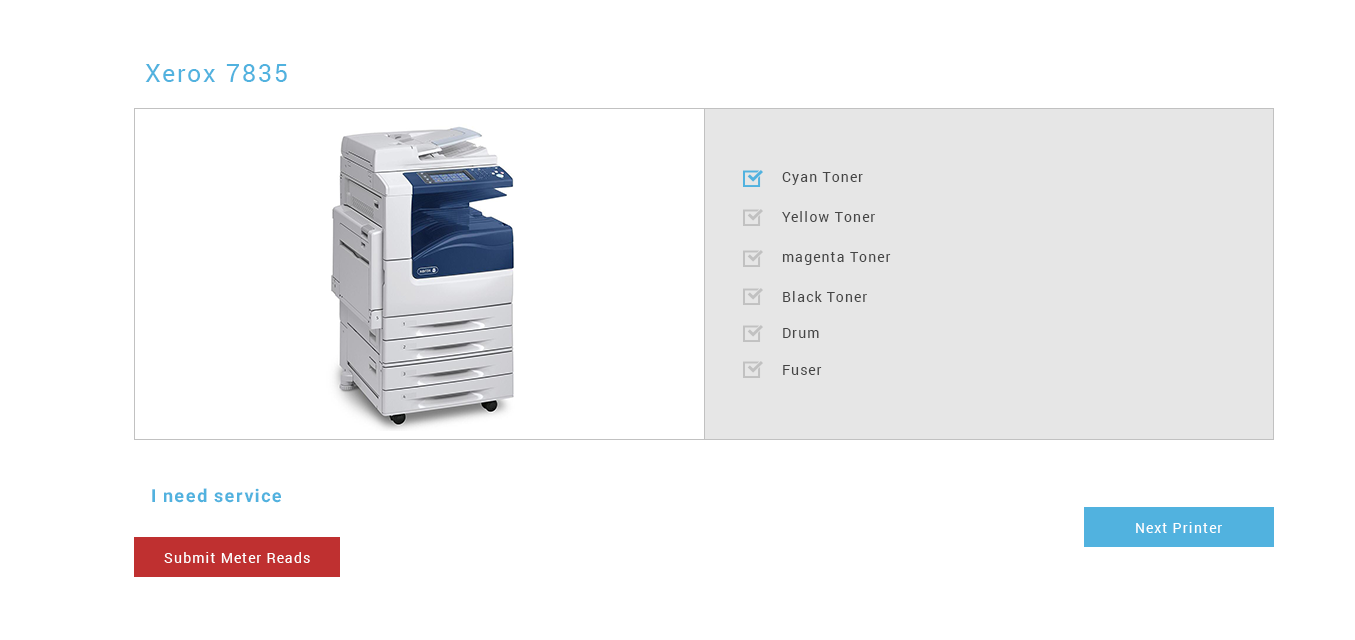
<style>
.page{position:relative;width:1355px;height:640px;background:#ffffff}
.page>*{position:absolute;margin:0}
.t1{font:25px "Roboto-Regular";letter-spacing:0.08em;color:#51b2df}
.t2{font:14px "Roboto-Regular";letter-spacing:0.08em;color:#454545}
.t3{font:18px "Roboto-Bold";letter-spacing:0.08em;color:#51b2df}
.t4{font:14px "Roboto-Regular";letter-spacing:0.08em;color:#ffffff}
</style>
<div class="page">
<p class="t1" style="left:145px;top:64px;width:142px;height:18px">Xerox 7835</p>
<p class="t2" style="left:782px;top:172px;width:81px;height:13px">Cyan Toner</p>
<p class="t2" style="left:782px;top:211px;width:93px;height:11px">Yellow Toner</p>
<p class="t2" style="left:782px;top:252px;width:109px;height:13px">magenta Toner</p>
<p class="t2" style="left:783px;top:291px;width:84px;height:11px">Black Toner</p>
<p class="t2" style="left:783px;top:328px;width:36px;height:10px">Drum</p>
<p class="t2" style="left:783px;top:365px;width:39px;height:10px">Fuser</p>
<p class="t3" style="left:152px;top:488px;width:129px;height:15px">I need service</p>
<p class="t4" style="left:1136px;top:522px;width:86px;height:11px">Next Printer</p>
<p class="t4" style="left:164px;top:552px;width:146px;height:11px">Submit Meter Reads</p>
</div>
